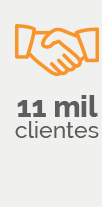
<style>
.page{position:relative;width:102px;height:207px;background:#f0f0ef}
.page>*{position:absolute;margin:0}
.t1{font:23px/20.7px "Raleway-Medium";color:#5d5d5d}
.t2{font:28.8px/31.1px "Raleway-ExtraBold";color:#5d5d5d}
</style>
<div class="page">
<p class="t1" style="left:15px;top:95px;width:84px;height:43px;text-align:center"><span class="t2">11 mil<br></span>clientes</p>
</div>
